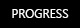
<style>
.page{position:relative;width:80px;height:28px;background:#000000}
.page>*{position:absolute;margin:0}
.t1{font:12px "SegoeUI";color:#ffffff;text-transform:uppercase}
</style>
<div class="page">
<p class="t1" style="left:12px;top:9px;width:57px;height:9px">PROGRESS</p>
</div>
